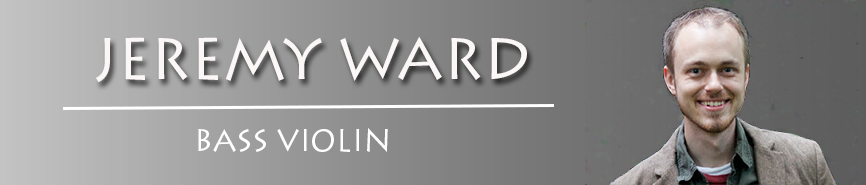
<style>
.page{position:relative;width:866px;height:185px}
.page>*{position:absolute;margin:0}
.t1{font:57.7px "LithosPro-Regular";color:#fcf7f7}
.t2{font:30px "LithosPro-Regular";color:#fefefe}
</style>
<div class="page">
<p class="t1" style="left:96px;top:36px;width:431px;height:46px">JEREMY WARD</p>
<p class="t2" style="left:198px;top:128px;width:190px;height:24px">BASS VIOLIN</p>
</div>
